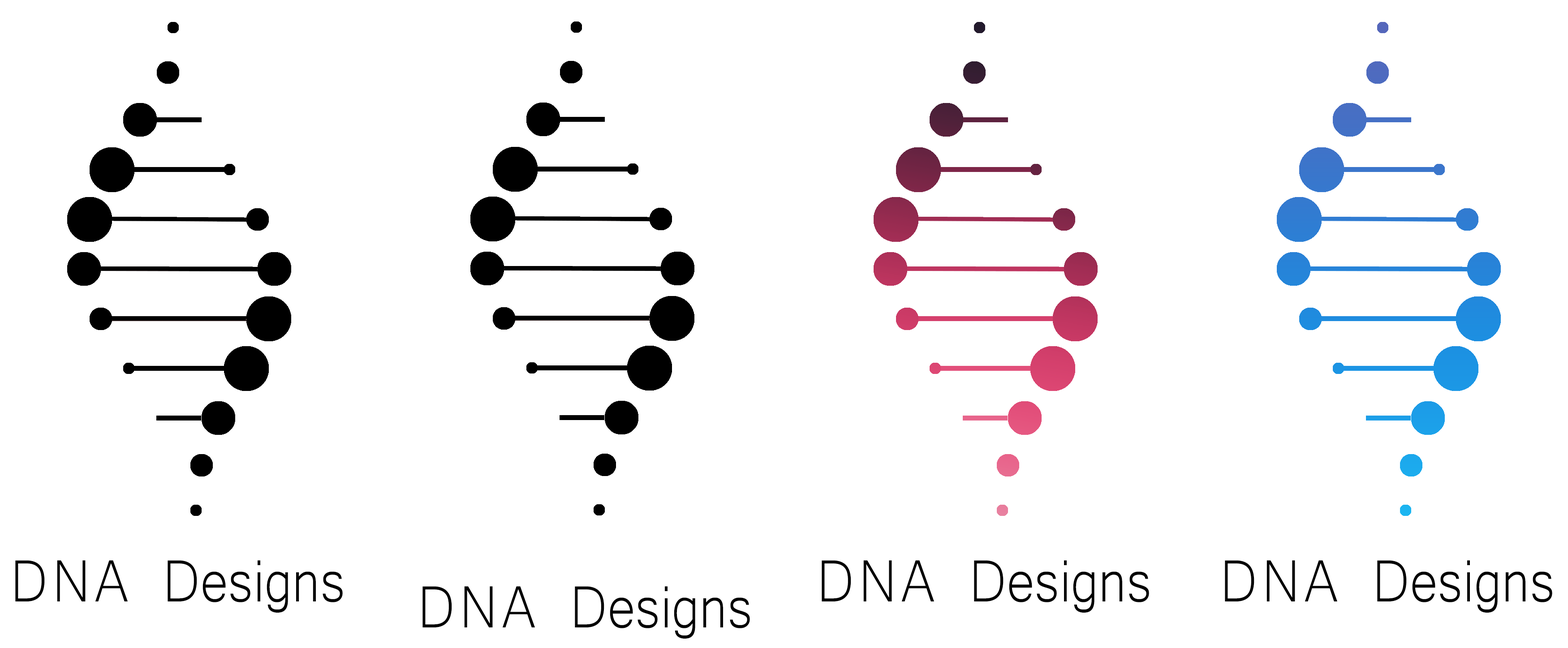
<style>
.page{position:relative;width:1568px;height:648px;background:#ffffff}
.page>*{position:absolute;margin:0}
.t1{font:76.8px "Microsoft-Yi-Baiti";color:#000000;scale:0.88 1}
.t2{font:76.8px "Microsoft-Yi-Baiti";letter-spacing:0.075em;color:#000000;scale:0.88 1}
</style>
<div class="page">
<p class="t1" style="left:15px;top:560px;width:328px;height:53px"><span class="t2">DNA</span> Designs</p>
<p class="t1" style="left:822px;top:560px;width:327px;height:53px"><span class="t2">DNA</span> Designs</p>
<p class="t1" style="left:1225px;top:560px;width:327px;height:53px"><span class="t2">DNA</span> Designs</p>
<p class="t1" style="left:422px;top:586px;width:328px;height:53px"><span class="t2">DNA</span> Designs</p>
</div>
